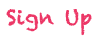
<style>
.page{position:relative;width:96px;height:38px;background:#ffffff}
.page>*{position:absolute;margin:0}
.t1{font:20px "Chalkduster";letter-spacing:0.025em;color:#3c7fc3}
.t2{font:20px "Chalkduster";letter-spacing:0.025em;color:#ec3766}
</style>
<div class="page">
<p class="t1" style="left:6px;top:9px;width:86px;height:27px">Forgot Password?<span class="t2"> Sign Up</span></p>
</div>
